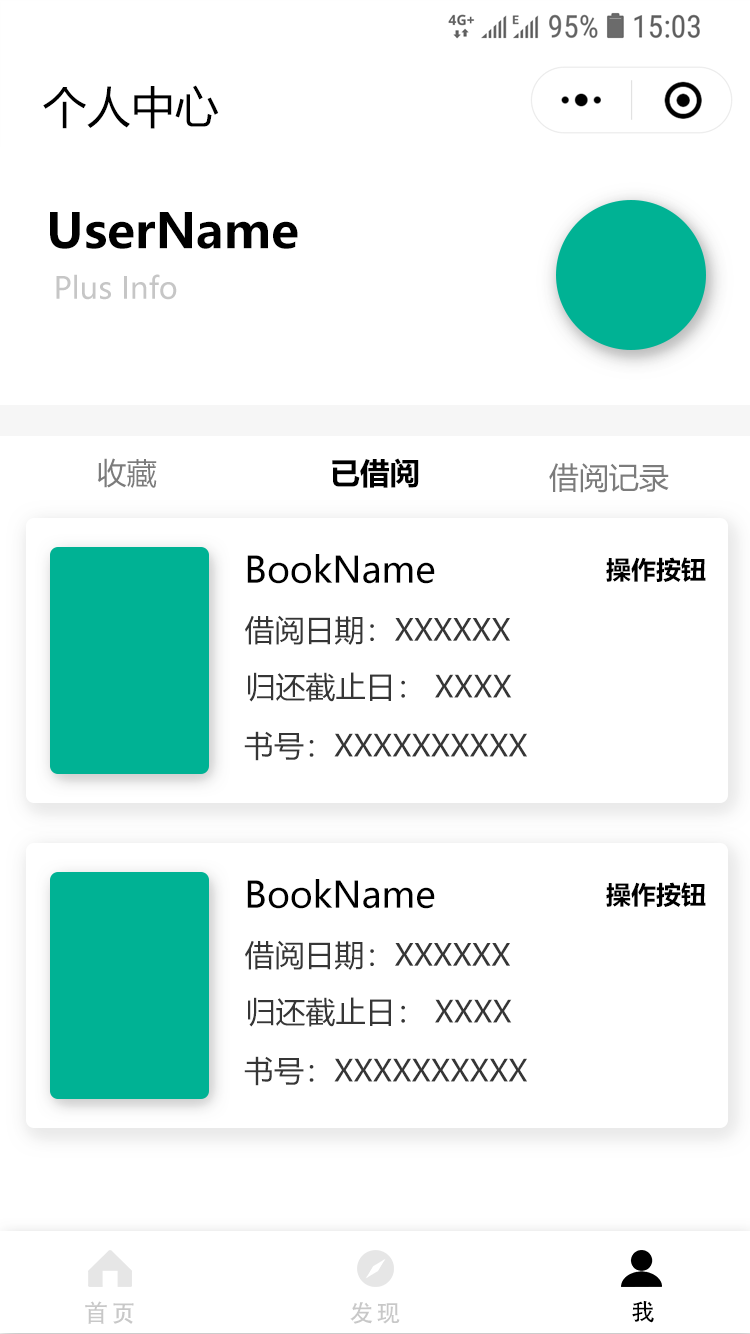
<style>
.page{position:relative;width:750px;height:1334px;background:#ffffff}
.page>*{position:absolute;margin:0}
.t1{font:44px "MicrosoftYaHeiUI";color:#000000}
.t2{font:48px "MicrosoftYaHeiUI-Bold";color:#000000}
.t3{font:30px "MicrosoftYaHeiUI";color:#c6c6c6}
.t4{font:30px "MicrosoftYaHeiUI";color:#7c7c7c}
.t5{font:30px "MicrosoftYaHeiUI-Bold";color:#000000}
.t6{font:36px "MicrosoftYaHeiUI";color:#000000}
.t7{font:25px "MicrosoftYaHeiUI-Bold";color:#000000}
.t8{font:30.1px "MicrosoftYaHeiUI";color:#363636}
.t9{font:30px "MicrosoftYaHeiUI";color:#363636}
.t10{font:24.1px "AdobeHeitiStd-Regular";letter-spacing:0.12em;color:#c8c8c8}
.t11{font:24.1px "AdobeHeitiStd-Regular";letter-spacing:0.12em;color:#000000}
</style>
<div class="page">
<p class="t1" style="left:43px;top:85px;width:176px;height:44px">个人中心</p>
<p class="t2" style="left:50px;top:212px;width:248px;height:37px">UserName</p>
<p class="t3" style="left:56px;top:274px;width:121px;height:26px">Plus Info</p>
<p class="t4" style="left:97px;top:458px;width:60px;height:30px">收藏</p>
<p class="t5" style="left:332px;top:458px;width:87px;height:30px">已借阅</p>
<p class="t4" style="left:549px;top:463px;width:120px;height:30px">借阅记录</p>
<p class="t6" style="left:247px;top:554px;width:188px;height:30px">BookName</p>
<p class="t7" style="left:606px;top:557px;width:100px;height:25px">操作按钮</p>
<p class="t8" style="left:245px;top:615px;width:265px;height:30px">借阅日期：XXXXXX</p>
<p class="t9" style="left:248px;top:672px;width:264px;height:30px">归还截止日： XXXX</p>
<p class="t8" style="left:244px;top:731px;width:283px;height:30px">书号：XXXXXXXXXX</p>
<p class="t6" style="left:247px;top:879px;width:188px;height:30px">BookName</p>
<p class="t7" style="left:606px;top:882px;width:100px;height:25px">操作按钮</p>
<p class="t8" style="left:245px;top:940px;width:265px;height:30px">借阅日期：XXXXXX</p>
<p class="t9" style="left:248px;top:997px;width:264px;height:30px">归还截止日： XXXX</p>
<p class="t8" style="left:244px;top:1056px;width:283px;height:30px">书号：XXXXXXXXXX</p>
<p class="t10" style="left:85px;top:1301px;width:49px;height:23px">首页</p>
<p class="t10" style="left:350px;top:1302px;width:50px;height:22px">发现</p>
<p class="t11" style="left:632px;top:1300px;width:22px;height:23px">我</p>
</div>
